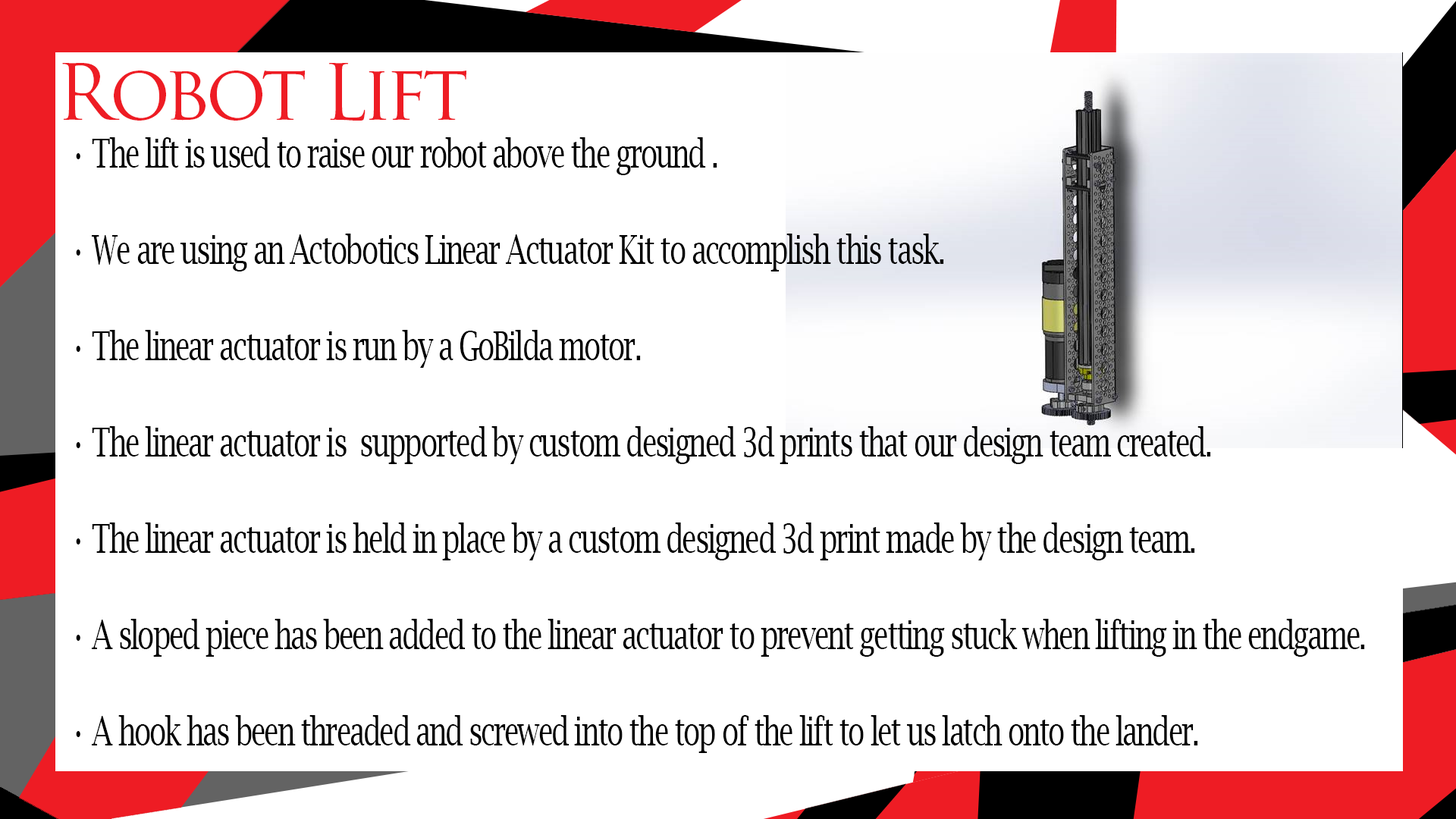
<style>
.page{position:relative;width:1456px;height:819px;background:#ffffff}
.page>*{position:absolute;margin:0}
.t1{font:75.8px "TrajanPro-Regular";letter-spacing:-0.06em;color:#ee1c24}
.t2{font:39.6px/96.3px "LucidaBright";letter-spacing:-0.06em;color:#000000;scale:0.71 1}
.t3{font:39.6px/96.3px "FranklinGothic-Heavy";letter-spacing:-0.06em;color:#000000;scale:0.71 1}
</style>
<div class="page">
<p class="t1" style="left:62px;top:63px;width:404px;height:58px">Robot Lift</p>
<p class="t2" style="left:76px;top:137px;width:1289px;height:616px"><span class="t3"> </span>• The lift is used to raise our robot above the ground .<br> • We are using an Actobotics Linear Actuator Kit to accomplish this task.<br> • The linear actuator is run by a GoBilda motor.<br> • The linear actuator is  supported by custom designed 3d prints that our design team created. <br> • The linear actuator is held in place by a custom designed 3d print made by the design team.<br> • A sloped piece has been added to the linear actuator to prevent getting stuck when lifting in the endgame.<br>    • A hook has been threaded and screwed into the top of the lift to let us latch onto the lander.</p>
</div>
